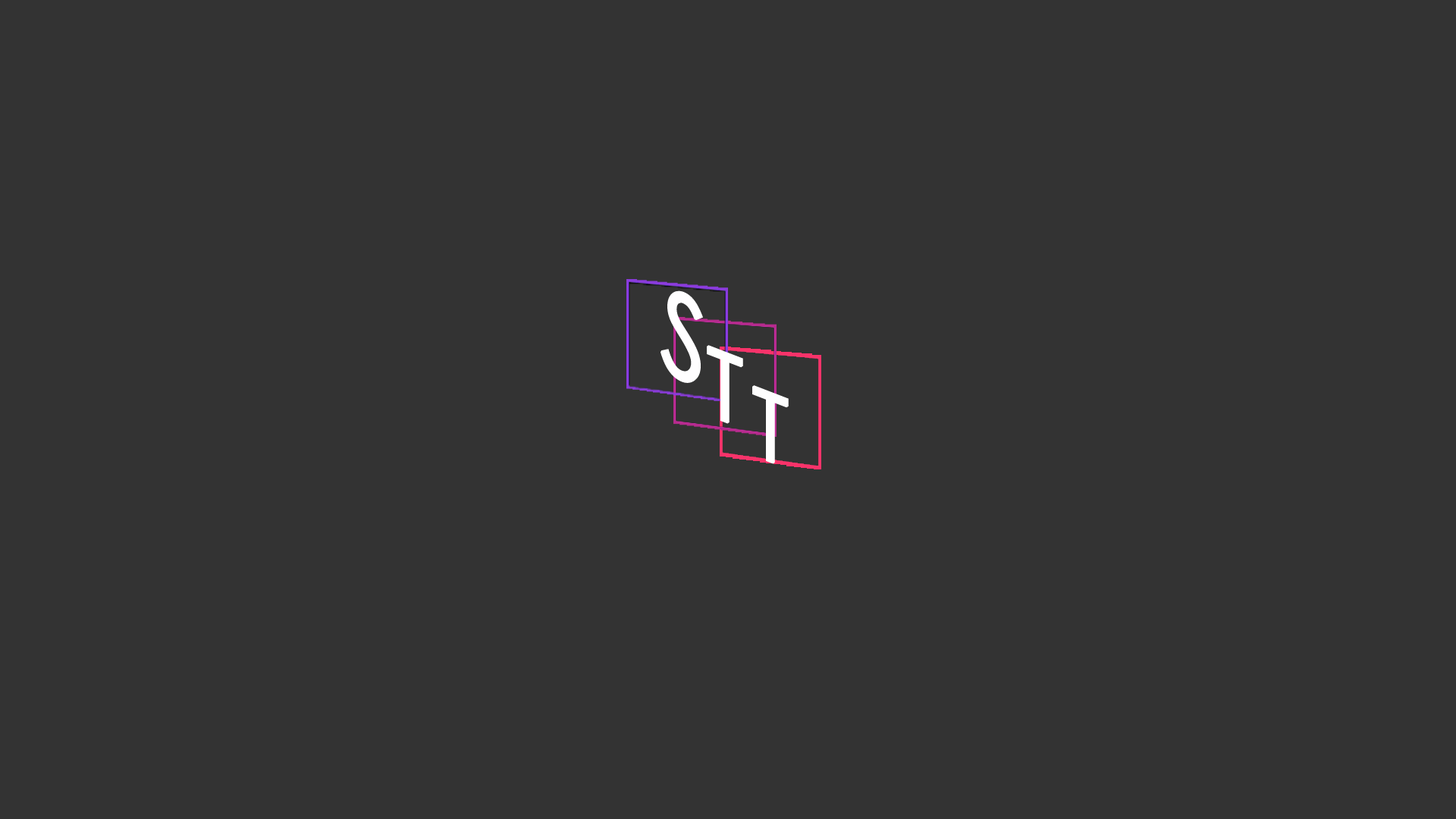
<style>
.page{position:relative;width:1456px;height:819px;background:#333333}
.page>*{position:absolute;margin:0}
.t1{font:121.7px "CenturyGothic";color:#fffeff;font-weight:bold;font-style:italic;scale:0.83 1}
.t2{font:94.8px "CenturyGothic";color:#fefffe;font-weight:bold;scale:0.96 1}
.t3{font:94.8px "CenturyGothic";color:#fefefe;font-weight:bold;scale:0.96 1}
</style>
<div class="page">
<p class="t1" style="left:660px;top:290px;width:43px;height:93px;rotate:28deg">S</p>
<p class="t2" style="left:707px;top:345px;width:36px;height:79px;rotate:21deg">T</p>
<p class="t3" style="left:752px;top:385px;width:37px;height:79px;rotate:21deg">T</p>
</div>
